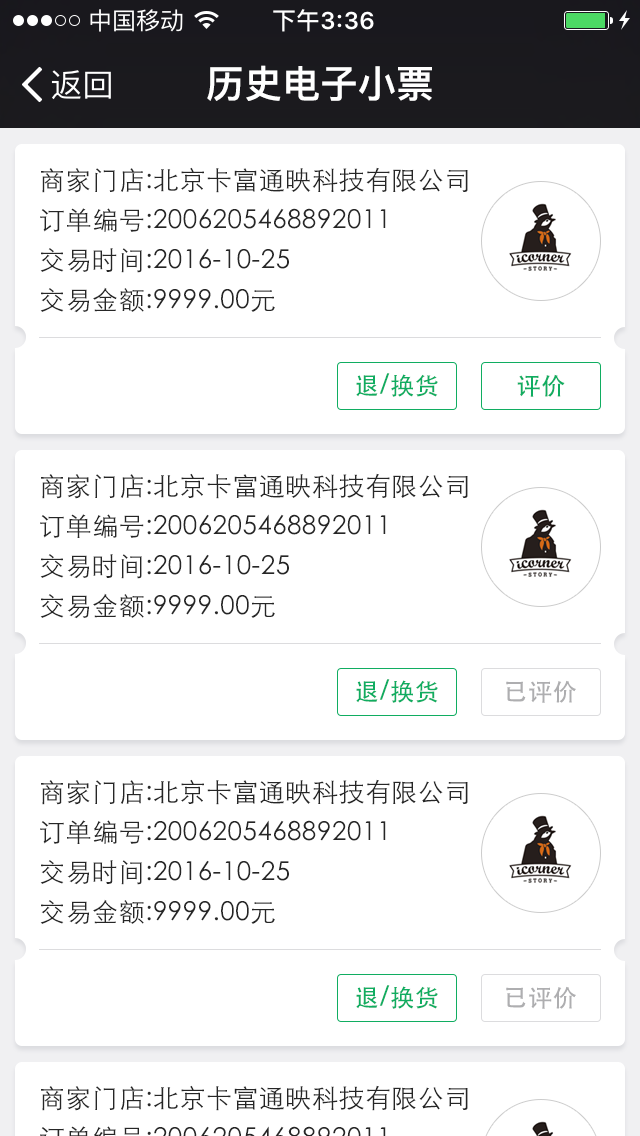
<style>
.page{position:relative;width:640px;height:1136px;background:#ffffff}
.page>*{position:absolute;margin:0}
.t1{font:38px "PingFangSC-Semibold";color:#ffffff}
.t2{font:26px/40px "STHeitiSC-Light";letter-spacing:0.02em;color:#262626}
.t3{font:24px "STHeitiSC-Medium";letter-spacing:0.02em;color:#10ad61}
.t4{font:24px "STHeitiSC-Medium";letter-spacing:0.02em;color:#aeaeb0}
</style>
<div class="page">
<p class="t1" style="left:207px;top:65px;width:225px;height:36px">历史电子小票</p>
<p class="t2" style="left:40px;top:167px;width:428px;height:146px">商家门店:北京卡富通映科技有限公司<br>订单编号:2006205468892011<br>交易时间:2016-10-25<br>交易金额:9999.00元</p>
<p class="t3" style="left:356px;top:373px;width:82px;height:24px">退/换货</p>
<p class="t3" style="left:517px;top:374px;width:48px;height:23px">评价</p>
<p class="t2" style="left:40px;top:473px;width:428px;height:146px">商家门店:北京卡富通映科技有限公司<br>订单编号:2006205468892011<br>交易时间:2016-10-25<br>交易金额:9999.00元</p>
<p class="t3" style="left:356px;top:679px;width:82px;height:24px">退/换货</p>
<p class="t4" style="left:506px;top:680px;width:70px;height:23px">已评价</p>
<p class="t2" style="left:40px;top:779px;width:428px;height:146px">商家门店:北京卡富通映科技有限公司<br>订单编号:2006205468892011<br>交易时间:2016-10-25<br>交易金额:9999.00元</p>
<p class="t3" style="left:356px;top:985px;width:82px;height:24px">退/换货</p>
<p class="t4" style="left:506px;top:986px;width:70px;height:23px">已评价</p>
</div>
